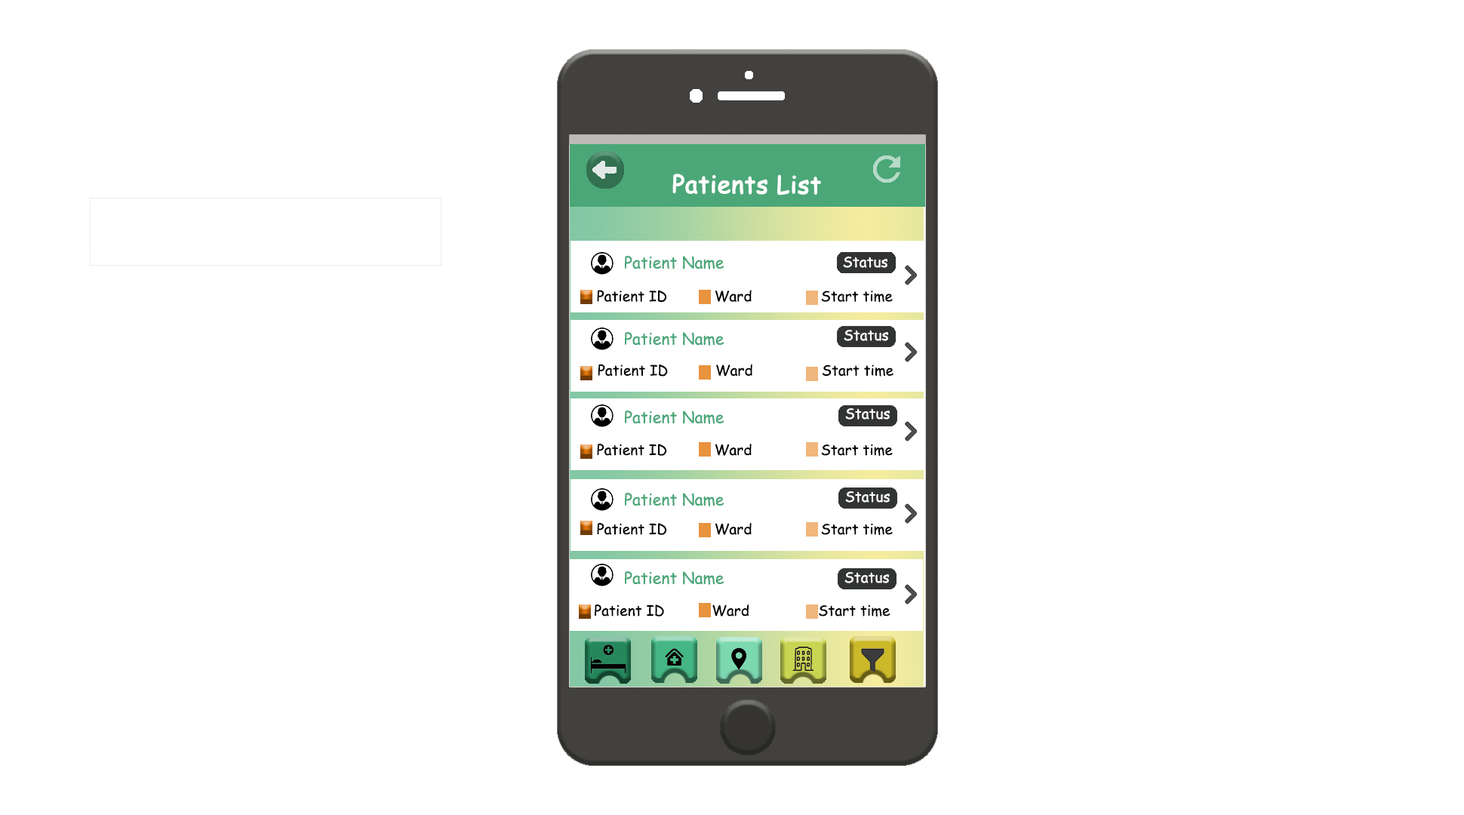
<style>
.page{position:relative;width:1464px;height:815px;background:#ffffff}
.page>*{position:absolute;margin:0}
.t1{font:24px "ComicSansMS";color:#ffffff;font-weight:bold}
.t2{font:16px "ComicSansMS";color:#4ba778}
.t3{font:14.4px "ComicSansMS";color:#fefefe}
.t4{font:14.4px "ComicSansMS";color:#000000}
</style>
<div class="page">
<p class="t1" style="left:672px;top:174px;width:149px;height:21px">Patients List</p>
<p class="t2" style="left:625px;top:256px;width:99px;height:13px">Patient Name</p>
<p class="t3" style="left:843px;top:256px;width:44px;height:12px">Status</p>
<p class="t4" style="left:597px;top:290px;width:295px;height:13px">Patient ID           Ward                Start time</p>
<p class="t3" style="left:843px;top:330px;width:45px;height:11px">Status</p>
<p class="t2" style="left:625px;top:332px;width:99px;height:14px">Patient Name</p>
<p class="t4" style="left:597px;top:364px;width:296px;height:12px">Patient ID           Ward                Start time</p>
<p class="t2" style="left:625px;top:410px;width:99px;height:14px">Patient Name</p>
<p class="t3" style="left:845px;top:408px;width:44px;height:11px">Status</p>
<p class="t4" style="left:597px;top:443px;width:295px;height:13px">Patient ID           Ward                Start time</p>
<p class="t2" style="left:625px;top:493px;width:99px;height:13px">Patient Name</p>
<p class="t3" style="left:845px;top:491px;width:44px;height:11px">Status</p>
<p class="t4" style="left:597px;top:522px;width:295px;height:13px">Patient ID           Ward                Start time</p>
<p class="t2" style="left:625px;top:571px;width:99px;height:14px">Patient Name</p>
<p class="t3" style="left:844px;top:572px;width:45px;height:11px">Status</p>
<p class="t4" style="left:594px;top:604px;width:296px;height:12px">Patient ID           Ward                Start time</p>
</div>
